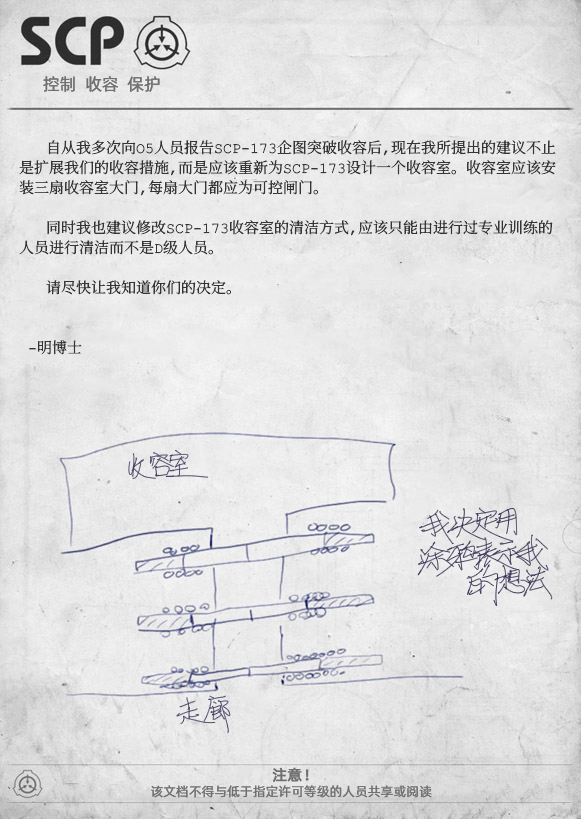
<style>
.page{position:relative;width:581px;height:819px}
.page>*{position:absolute;margin:0}
.t1{font:17px "AlibabaPuHuiTiR";color:#707070}
.t2{font:15px/20px "ContainmentBreach-Regular";color:#353535}
.t3{font:15px "AlibabaPuHuiTiR";color:#707070;font-weight:bold}
.t4{font:13px "AlibabaPuHuiTiR";color:#707070}
</style>
<div class="page">
<p class="t1" style="left:43px;top:76px;width:117px;height:16px">控制  收容  保护</p>
<p class="t2" style="left:19px;top:140px;width:537px;height:215px">自从我多次向O5人员报告SCP-173企图突破收容后，现在我所提出的建议不止<br>是扩展我们的收容措施,而是应该重新为SCP-173设计一个收容室。收容室应该安<br>装三扇收容室大门，每扇大门都应为可控闸门。<br><br>   同时我也建议修改SCP-173收容室的清洁方式，应该只能由进行过专业训练的<br>人员进行清洁而不是D级人员。<br><br>   请尽快让我知道你们的决定。<br><br><br> -明博士</p>
<p class="t3" style="left:272px;top:767px;width:37px;height:15px">注意！</p>
<p class="t4" style="left:151px;top:785px;width:281px;height:13px">该文档不得与低于指定许可等级的人员共享或阅读</p>
</div>
